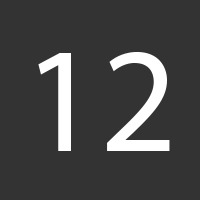
<style>
.page{position:relative;width:200px;height:200px;background:#333333}
.page>*{position:absolute;margin:0}
.t1{font:150px "MyriadPro-Regular";color:#ffffff}
</style>
<div class="page">
<p class="t1" style="left:38px;top:51px;width:132px;height:100px">12</p>
</div>
